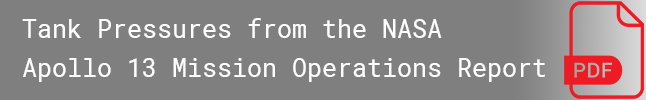
<style>
.page{position:relative;width:646px;height:100px;background:#7f7f7f}
.page>*{position:absolute;margin:0}
.t1{font:25px "RobotoMono-Regular";color:#ffffff}
</style>
<div class="page">
<p class="t1" style="left:22px;top:18px;width:523px;height:64px">Tank Pressures from the NASA<br>Apollo 13 Mission Operations Report</p>
</div>
